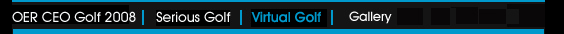
<style>
.page{position:relative;width:564px;height:34px;background:#000000}
.page>*{position:absolute;margin:0}
.t1{font:14px "AvantGardeITCbyBT-Medium";color:#f7f9fa}
.t2{font:14px "AvantGardeITCbyBT-Medium";color:#fafbfb}
.t3{font:14px "AvantGardeITCbyBT-Medium";color:#0099cc}
</style>
<div class="page">
<p class="t1" style="left:12px;top:11px;width:124px;height:11px">OER CEO Golf 2008</p>
<p class="t2" style="left:156px;top:11px;width:75px;height:11px">Serious Golf</p>
<p class="t3" style="left:251px;top:11px;width:70px;height:12px">Virtual Golf</p>
</div>
